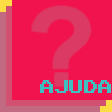
<style>
.page{position:relative;width:112px;height:112px;background:#f0134d}
.page>*{position:absolute;margin:0}
.t1{font:27px "ArcadeClassic";color:#40bfc1}
</style>
<div class="page">
<p class="t1" style="left:40px;top:80px;width:71px;height:13px">AJUDA</p>
</div>
